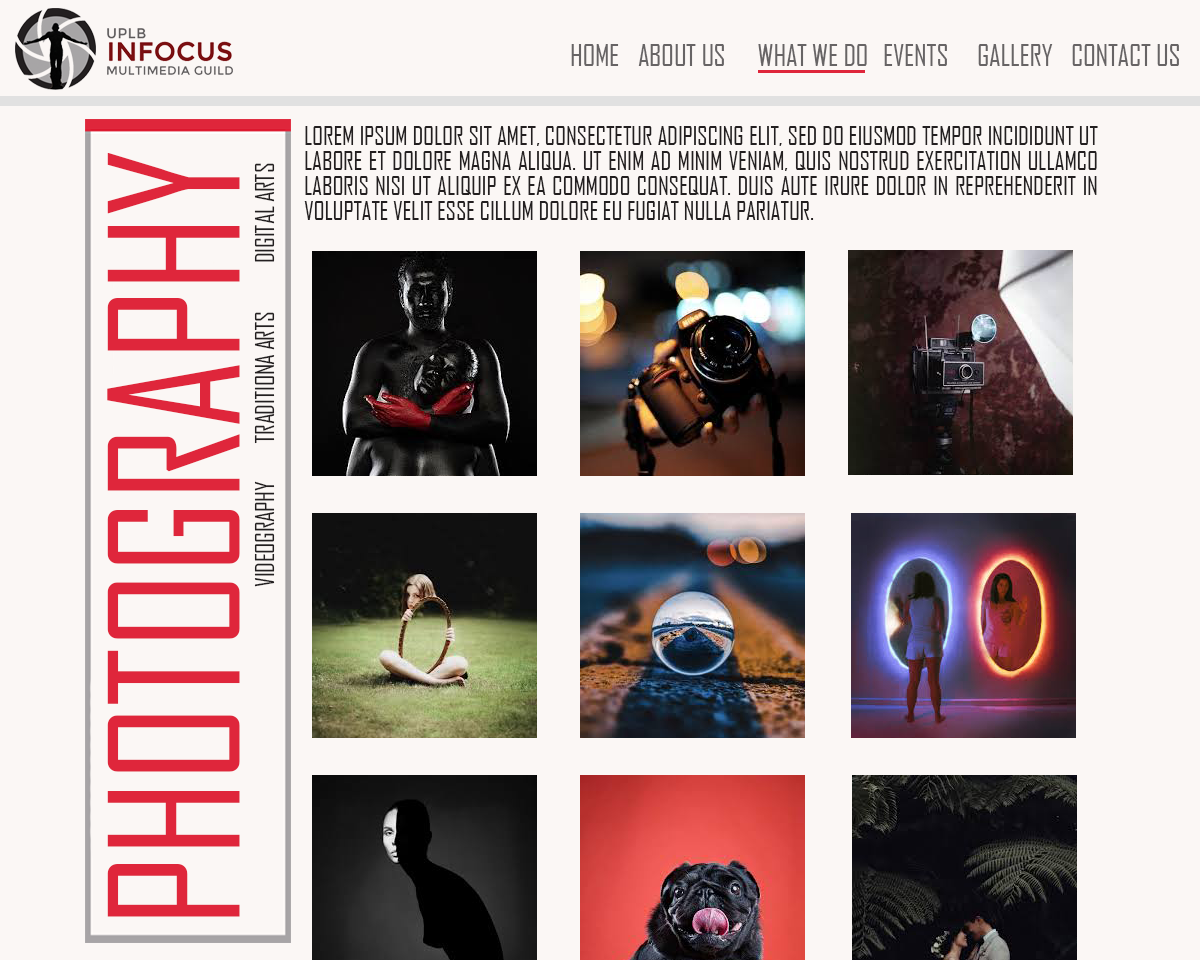
<style>
.page{position:relative;width:1200px;height:960px;background:#fbf7f5}
.page>*{position:absolute;margin:0}
.t1{font:29.3px "AgencyFB-Reg";letter-spacing:-0.01em;color:#676465;text-transform:uppercase}
.t2{font:25px/25px "AgencyFB-Reg";letter-spacing:-0.01em;color:#231f20;text-transform:uppercase}
.t3{font:41.4px "AgencyFB-Reg";letter-spacing:-0.01em;color:#df263b;text-transform:uppercase}
.t4{font:24.9px "AgencyFB-Reg";letter-spacing:-0.01em;color:#231f20;text-transform:uppercase}
</style>
<div class="page">
<p class="t1" style="left:571px;top:44px;width:608px;height:22px">home   about us  what we do  events gallery contact us</p>
<p class="t2" style="left:304px;top:126px;width:794px;height:94px;text-align:justify">Lorem ipsum dolor sit amet, consectetur adipiscing elit, sed do eiusmod tempor incididunt ut labore et dolore magna aliqua. Ut enim ad minim veniam, quis nostrud exercitation ullamco laboris nisi ut aliquip ex ea commodo consequat. Duis aute irure dolor in reprehenderit in voluptate velit esse cillum dolore eu fugiat nulla pariatur.</p>
<p class="t3" style="left:107px;top:153px;width:133px;height:764px;rotate:-90deg">photography</p>
<p class="t4" style="left:254px;top:163px;width:21px;height:424px;rotate:-90deg">videography   traditiona Arts  digital arts</p>
</div>
